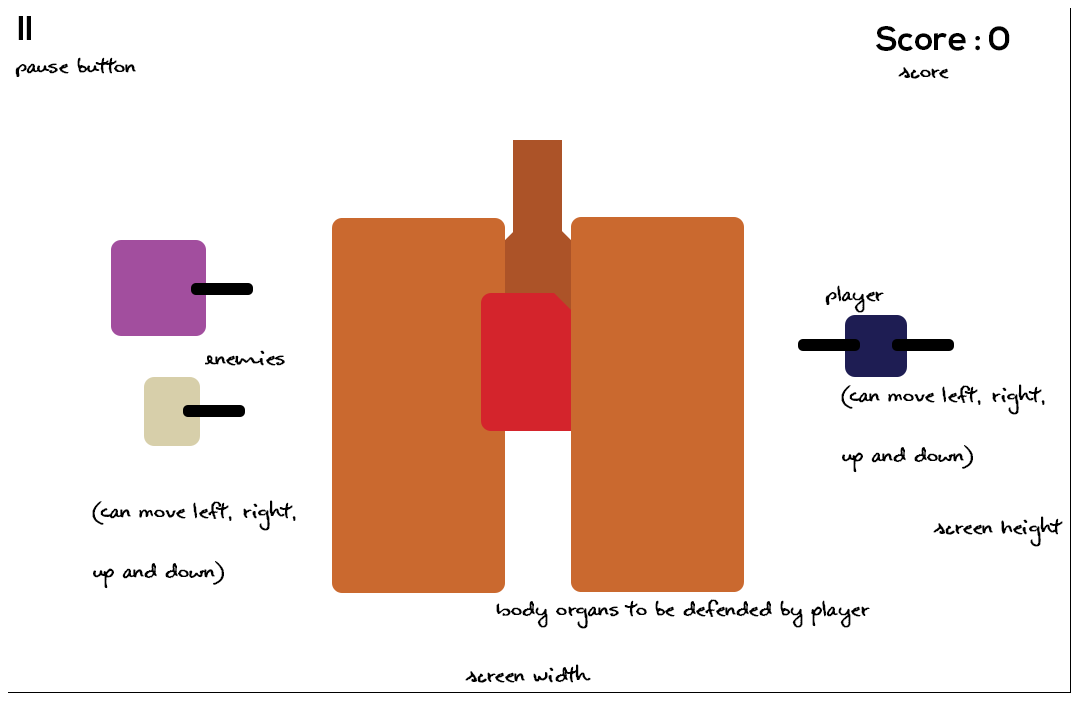
<style>
.page{position:relative;width:1080px;height:720px;background:#ffffff}
.page>*{position:absolute;margin:0}
.t1{font:33.3px "NexaBold";letter-spacing:-0.004em;color:#000000}
.t2{font:33.3px "AlanisHand";letter-spacing:-0.004em;color:#000000}
.t3{font:33.3px/60px "AlanisHand";letter-spacing:-0.004em;color:#000000}
</style>
<div class="page">
<p class="t1" style="left:18px;top:16px;width:13px;height:24px">II</p>
<p class="t1" style="left:876px;top:26px;width:134px;height:25px">Score : 0</p>
<p class="t2" style="left:15px;top:57px;width:121px;height:20px">Pause button</p>
<p class="t2" style="left:898px;top:67px;width:51px;height:12px">Score</p>
<p class="t2" style="left:825px;top:285px;width:59px;height:28px">Player</p>
<p class="t2" style="left:205px;top:350px;width:80px;height:16px">Enemies</p>
<p class="t3" style="left:841px;top:384px;width:204px;height:89px">(Can Move left, right,<br>up and down)</p>
<p class="t3" style="left:92px;top:500px;width:204px;height:89px">(Can Move left, right,<br>up and down)</p>
<p class="t2" style="left:933px;top:516px;width:130px;height:31px">Screen Height</p>
<p class="t2" style="left:496px;top:599px;width:374px;height:30px">Body organs to be defended by player</p>
<p class="t2" style="left:465px;top:664px;width:126px;height:19px">Screen Width</p>
</div>
